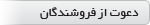
<style>
.page{position:relative;width:150px;height:25px}
.page>*{position:absolute;margin:0}
.t1{font:13.2px "BYekan";color:#231f20}
</style>
<div class="page">
<p class="t1" style="left:40px;top:7px;width:99px;height:12px">دعوت از فروشندگان</p>
</div>
